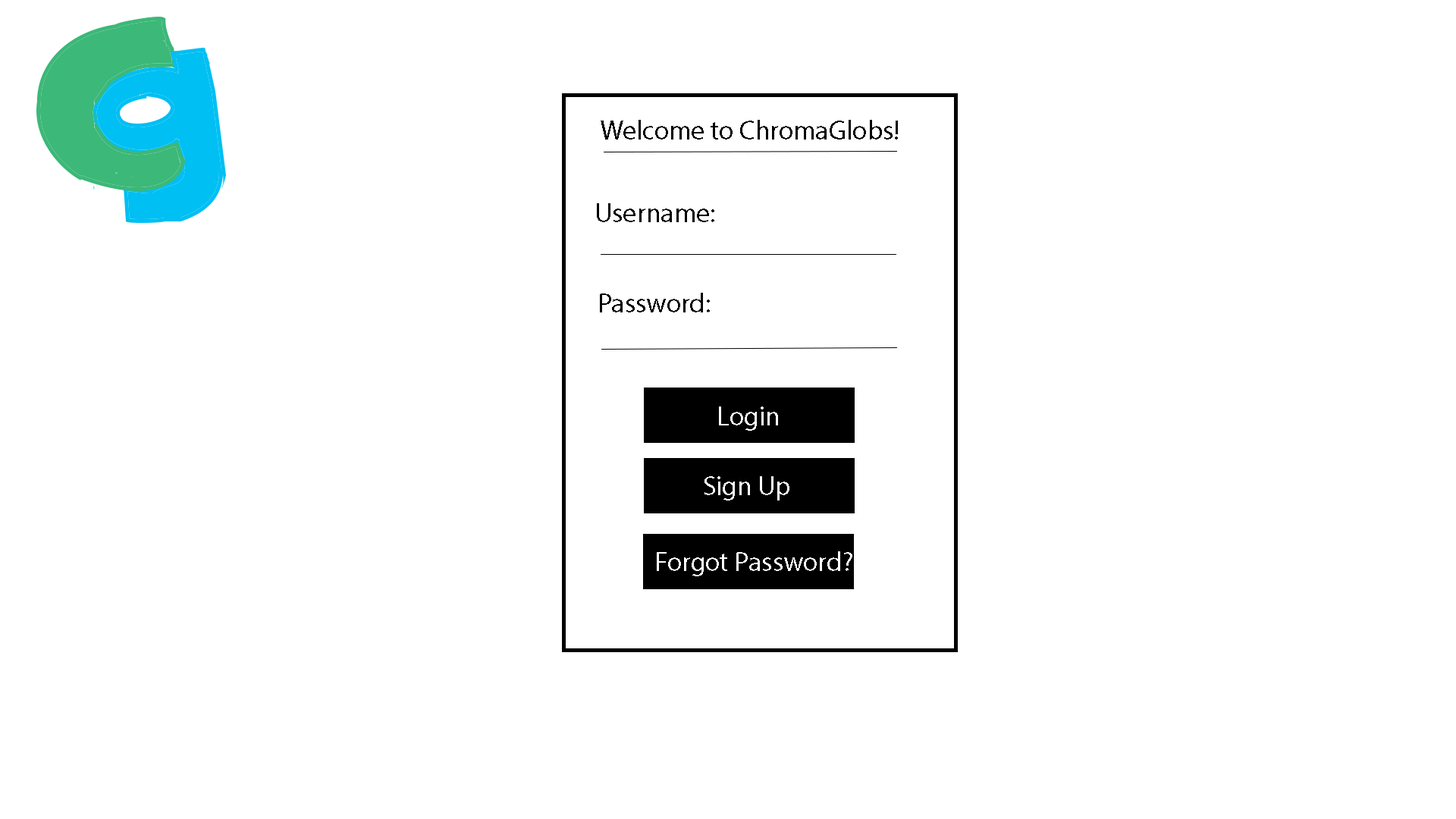
<style>
.page{position:relative;width:1456px;height:819px;background:#ffffff}
.page>*{position:absolute;margin:0}
.t1{font:27.3px "MyriadPro-Regular";color:#000000}
.t2{font:27.3px "MyriadPro-Regular";color:#ffffff}
</style>
<div class="page">
<p class="t1" style="left:601px;top:120px;width:297px;height:20px">Welcome to ChromaGlobs!</p>
<p class="t1" style="left:597px;top:203px;width:117px;height:19px">Username:</p>
<p class="t1" style="left:600px;top:293px;width:110px;height:19px">Password:</p>
<p class="t2" style="left:719px;top:406px;width:59px;height:25px">Login</p>
<p class="t2" style="left:704px;top:476px;width:85px;height:24px">Sign Up</p>
<p class="t2" style="left:657px;top:551px;width:195px;height:25px">Forgot Password?</p>
</div>
